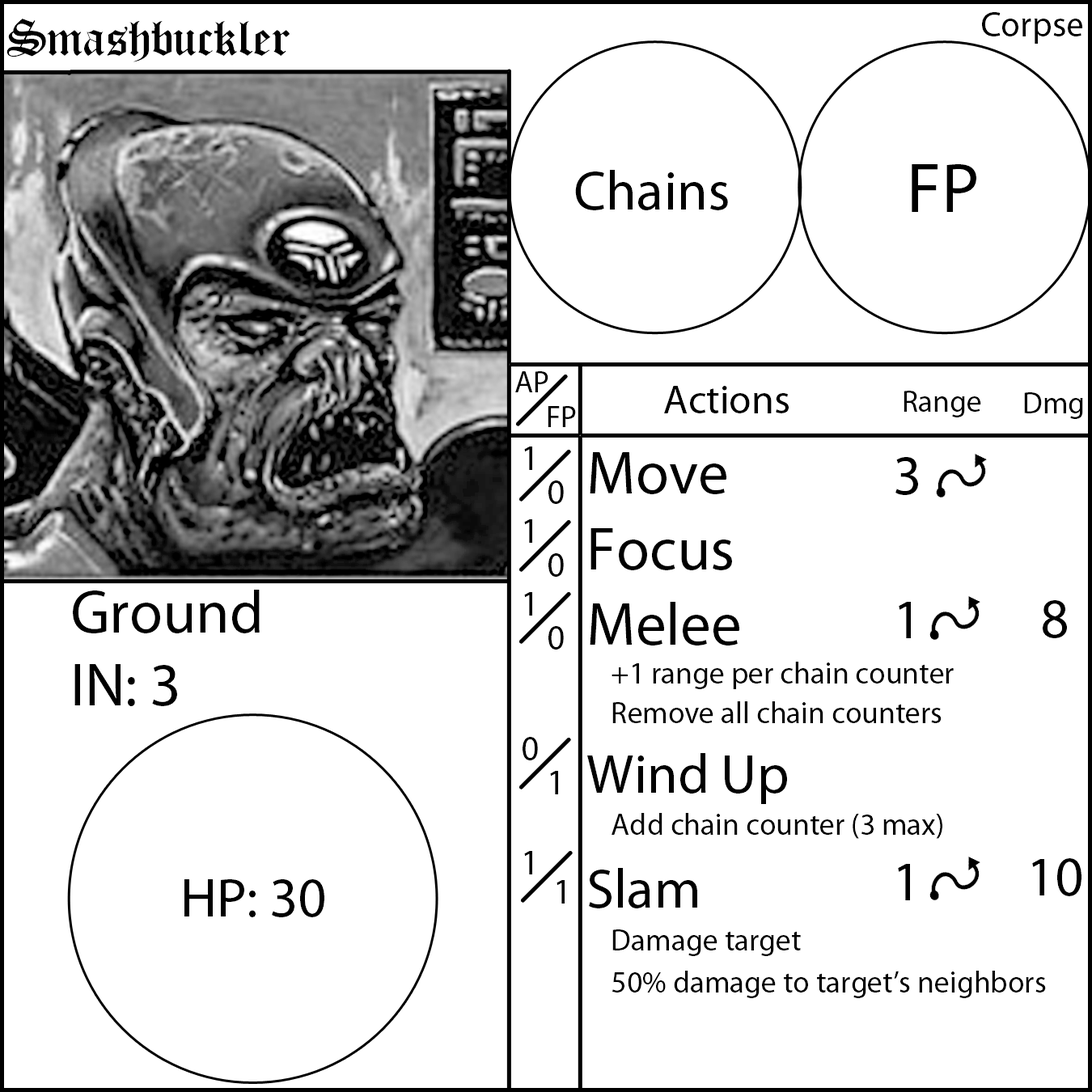
<style>
.page{position:relative;width:1092px;height:1092px;background:#ffffff}
.page>*{position:absolute;margin:0}
.t1{font:35.4px "MyriadPro-Regular";color:#000000}
.t2{font:55.6px "OldLondon";color:#000000}
.t3{font:55.6px "MyriadPro-Regular";color:#000000}
.t4{font:70.8px "MyriadPro-Regular";color:#000000}
.t5{font:30.3px "MyriadPro-Regular";color:#000000}
.t6{font:40.4px "MyriadPro-Regular";color:#000000}
.t7{font:60.7px "MyriadPro-Regular";color:#000000}
</style>
<div class="page">
<p class="t1" style="left:982px;top:12px;width:100px;height:32px">Corpse</p>
<p class="t2" style="left:6px;top:19px;width:284px;height:43px">Smashbuckler</p>
<p class="t3" style="left:575px;top:170px;width:153px;height:40px">Chains</p>
<p class="t4" style="left:912px;top:164px;width:64px;height:48px">FP</p>
<p class="t5" style="left:515px;top:371px;width:33px;height:21px">AP</p>
<p class="t6" style="left:664px;top:386px;width:125px;height:27px">Actions</p>
<p class="t5" style="left:904px;top:391px;width:77px;height:26px">Range</p>
<p class="t5" style="left:1024px;top:392px;width:59px;height:27px">Dmg</p>
<p class="t5" style="left:548px;top:406px;width:28px;height:21px">FP</p>
<p class="t1" style="left:523px;top:447px;width:15px;height:313px">1<br>1<br>1<br><br>0</p>
<p class="t5" style="left:587px;top:452px;width:459px;height:546px"><span class="t7">Move<br>Focus<br>Melee<br></span> +1 range per chain counter<br> Remove all chain counters<br><span class="t3">Wind Up<br></span> Add chain counter (3 max)<br><span class="t3">Slam<br></span> Damage target<br> 50% damage to target’s neighbors</p>
<p class="t3" style="left:895px;top:457px;width:23px;height:181px;text-align:center">3<br><br>1</p>
<p class="t1" style="left:548px;top:480px;width:16px;height:314px">0<br>0<br>0<br><br>1</p>
<p class="t7" style="left:73px;top:590px;width:187px;height:116px">Ground<br>IN: 3</p>
<p class="t3" style="left:1032px;top:600px;width:49px;height:296px;text-align:center">8<br><br> <br>10</p>
<p class="t1" style="left:524px;top:851px;width:8px;height:23px">1</p>
<p class="t3" style="left:898px;top:864px;width:12px;height:36px">1</p>
<p class="t3" style="left:184px;top:879px;width:140px;height:38px">HP: 30</p>
<p class="t1" style="left:557px;top:880px;width:8px;height:24px">1</p>
</div>
